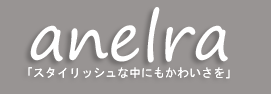
<style>
.page{position:relative;width:271px;height:94px;background:#989493}
.page>*{position:absolute;margin:0}
.t1{font:64.1px "SegoePrint";color:#ffffff}
.t2{font:12px "MS-Gothic";color:#ffffff}
</style>
<div class="page">
<p class="t1" style="left:30px;top:7px;width:198px;height:56px">anelra</p>
<p class="t2" style="left:28px;top:67px;width:202px;height:12px">「スタイリッシュな中にもかわいさを」</p>
</div>
